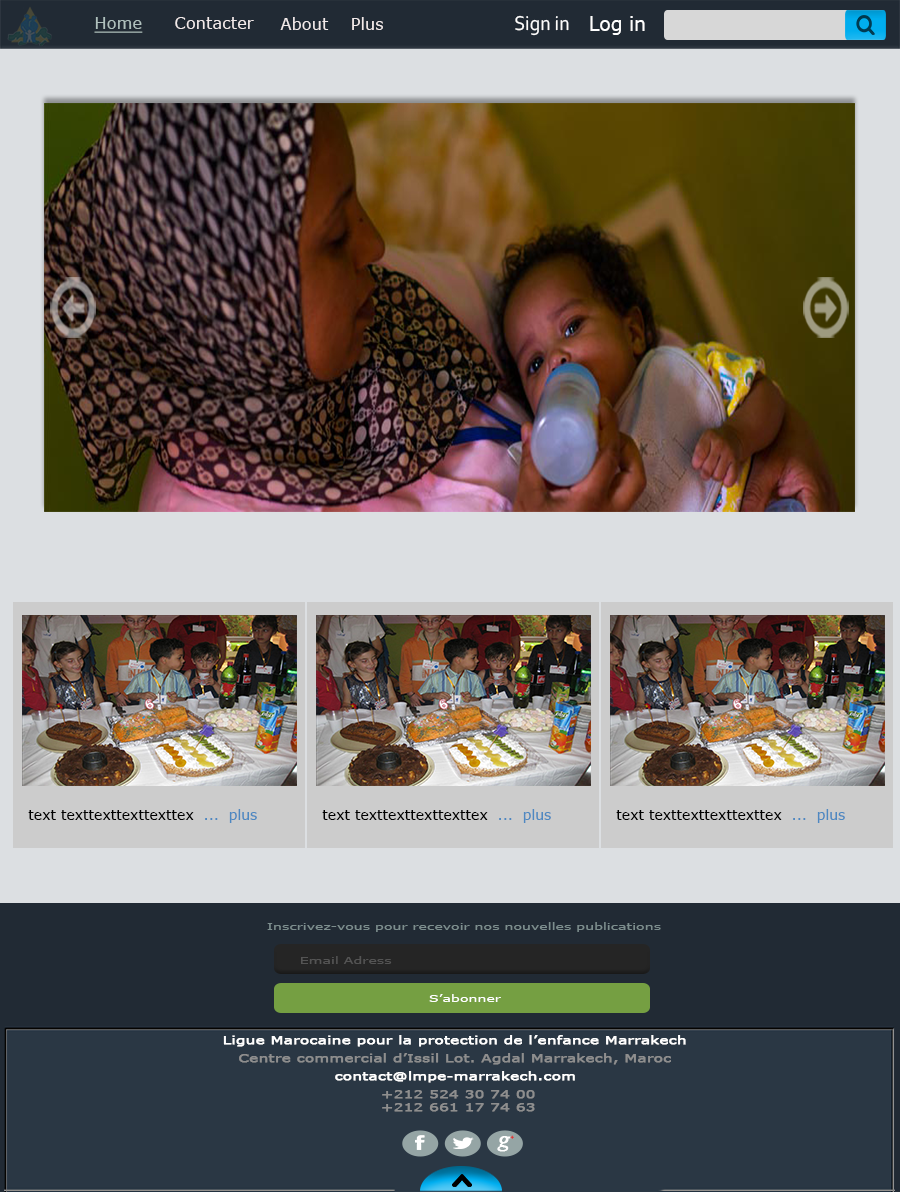
<style>
.page{position:relative;width:900px;height:1192px}
.page>*{position:absolute;margin:0}
.t1{font:17.3px "Verdana";color:#afc0bd;text-decoration:underline;scale:0.94 1}
.t2{font:17.3px "Verdana";color:#f2eaea;scale:0.94 1}
.t3{font:21px "Corbel";color:#fdfdfd;scale:0.94 1}
.t4{font:19.9px "Verdana";color:#ffffff;scale:0.94 1}
.t5{font:14px "Verdana";color:#000000}
.t6{font:14px "Verdana";color:#4e88c1}
.t7{font:10.3px "Verdana";color:#7d8e8e;scale:1.38 1}
.t8{font:10.3px "Verdana";color:#545454;scale:1.38 1}
.t9{font:10.3px "Verdana";color:#ffffff;scale:1.38 1}
.t10{font:10.9px "Verdana";color:#ffffff;font-weight:bold;scale:1.37 1}
.t11{font:10.9px "Verdana";color:#8e8e8e;font-weight:bold;scale:1.37 1}
.t12{font:28.2px "Vijaya";color:#ffffff;font-weight:bold}
.t13{font:7px "Vijaya";color:#e22727;font-weight:bold}
</style>
<div class="page">
<p class="t1" style="left:94px;top:17px;width:49px;height:16px">Home</p>
<p class="t2" style="left:175px;top:17px;width:79px;height:12px">Contacter</p>
<p class="t2" style="left:280px;top:17px;width:49px;height:13px">About</p>
<p class="t2" style="left:352px;top:17px;width:31px;height:13px">Plus</p>
<p class="t3" style="left:515px;top:15px;width:54px;height:21px">Sign in</p>
<p class="t4" style="left:590px;top:16px;width:55px;height:19px">Log in</p>
<p class="t5" style="left:28px;top:809px;width:229px;height:14px">text texttexttexttexttex  <span class="t6">...  plus</span></p>
<p class="t5" style="left:322px;top:809px;width:229px;height:14px">text texttexttexttexttex  <span class="t6">...  plus</span></p>
<p class="t5" style="left:616px;top:809px;width:229px;height:14px">text texttexttexttexttex  <span class="t6">...  plus</span></p>
<p class="t7" style="left:267px;top:922px;width:394px;height:10px">Inscrivez-vous pour recevoir nos nouvelles publications</p>
<p class="t8" style="left:301px;top:956px;width:91px;height:8px">Email Adress</p>
<p class="t9" style="left:429px;top:994px;width:72px;height:8px">S’abonner</p>
<p class="t10" style="left:223px;top:1035px;width:463px;height:12px">Ligue Marocaine pour la protection de l’enfance Marrakech</p>
<p class="t11" style="left:239px;top:1053px;width:432px;height:12px">Centre commercial d’Issil Lot. Agdal Marrakech, Maroc</p>
<p class="t10" style="left:335px;top:1071px;width:240px;height:12px">contact@lmpe-marrakech.com</p>
<p class="t11" style="left:382px;top:1090px;width:153px;height:22px">+212 524 30 74 00  <br>+212 661 17 74 63</p>
<p class="t12" style="left:497px;top:1135px;width:17px;height:17px">g<span class="t13">+</span></p>
</div>
